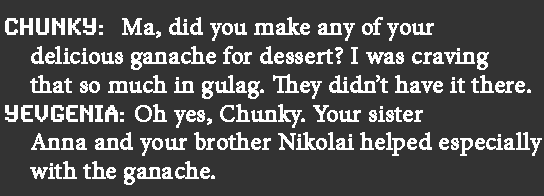
<style>
.page{position:relative;width:544px;height:196px;background:#333333}
.page>*{position:absolute;margin:0}
.t1{font:24px "MinionPro-Regular";color:#ffffff;font-weight:bold}
.t2{font:24px "SynchroLET";color:#ffffff;font-weight:bold}
</style>
<div class="page">
<p class="t1" style="left:5px;top:17px;width:537px;height:168px"><span class="t2">CHUNKY:  </span>Ma, did you make any of your <br>    delicious ganache for dessert? I was craving<br>    that so much in gulag. They didn’t have it there. <br><span class="t2">Yevgenia: </span>Oh yes, Chunky. Your sister  <br>    Anna and your brother Nikolai helped especially<br>    with the ganache.</p>
</div>
